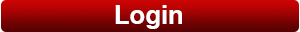
<style>
.page{position:relative;width:300px;height:32px}
.page>*{position:absolute;margin:0}
.t1{font:25.6px "Helvetica-Bold";color:#ffffff}
</style>
<div class="page">
<p class="t1" style="left:115px;top:5px;width:67px;height:24px">Login</p>
</div>
